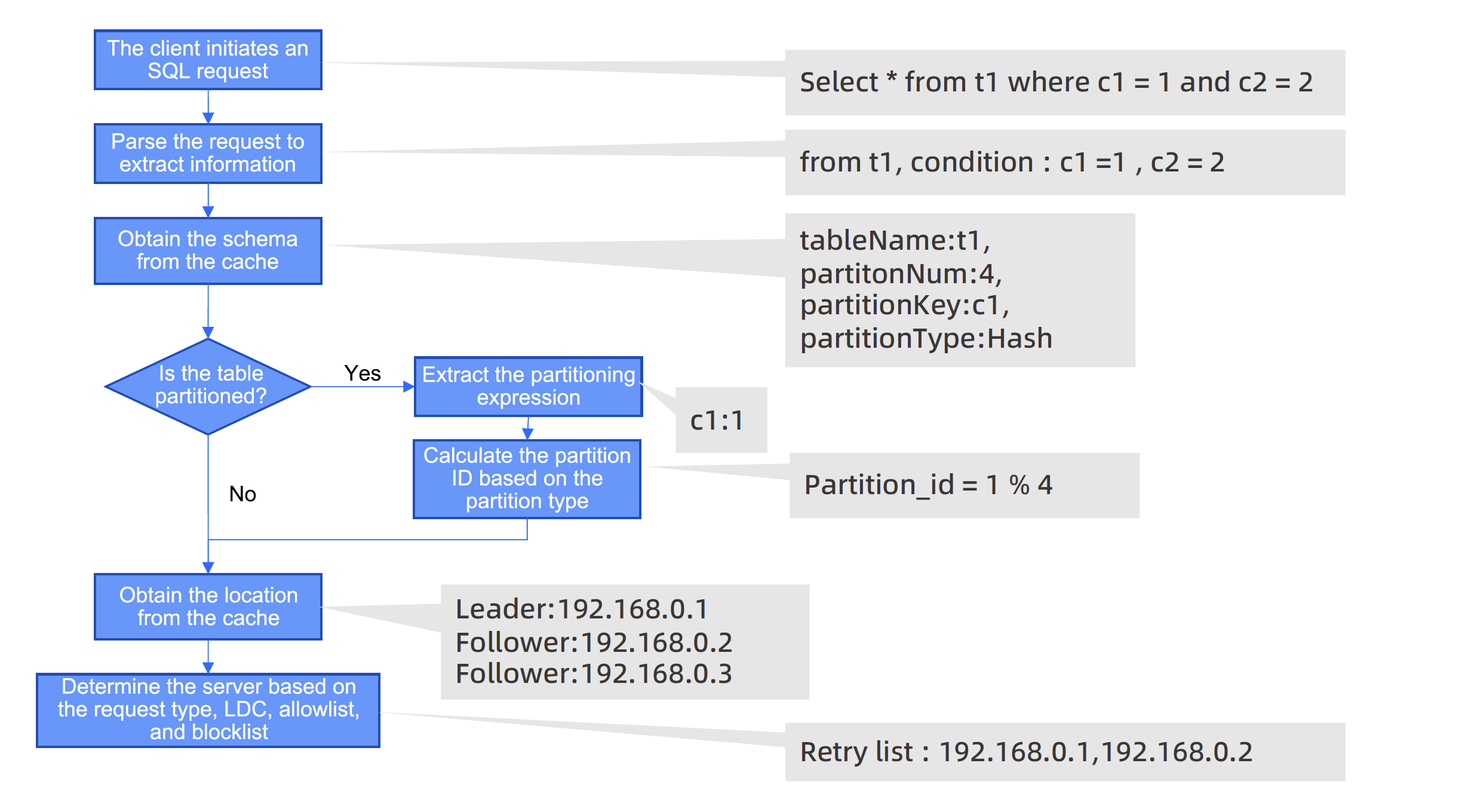
<style>
.page{position:relative;width:1474px;height:809px;background:#ffffff}
.page>*{position:absolute;margin:0}
.t1{font:21.5px/22.7px "ArialMT";color:#ffffff}
.t2{font:21.5px "ArialMT";color:#000000}
</style>
<div class="page">
<p class="t1" style="left:107px;top:40px;width:201px;height:42px;text-align:center">The client initiates an SQL request</p>
<p class="t1" style="left:112px;top:133px;width:192px;height:39px;text-align:center">Parse the request to extract information</p>
<p class="t1" style="left:118px;top:230px;width:179px;height:39px;text-align:center">Obtain the schema from the cache</p>
<p class="t1" style="left:156px;top:365px;width:110px;height:42px;text-align:center">Is the table partitioned?</p>
<p class="t2" style="left:344px;top:365px;width:37px;height:16px">Yes</p>
<p class="t1" style="left:424px;top:366px;width:211px;height:43px;text-align:center">Extract the partitioning expression</p>
<p class="t1" style="left:424px;top:447px;width:206px;height:66px;text-align:center">Calculate the partition ID based on the partition type</p>
<p class="t2" style="left:231px;top:486px;width:25px;height:16px">No</p>
<p class="t1" style="left:120px;top:586px;width:177px;height:39px;text-align:center">Obtain the location from the cache</p>
<p class="t1" style="left:58px;top:678px;width:300px;height:62px;text-align:center">Determine the server based on the request type, LDC, allowlist, and blocklist</p>
</div>
